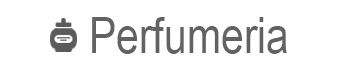
<style>
.page{position:relative;width:353px;height:72px;background:#ffffff}
.page>*{position:absolute;margin:0}
.t1{font:50px "ArialNarrow";color:#626262}
</style>
<div class="page">
<p class="t1" style="left:92px;top:17px;width:195px;height:37px">Perfumeria</p>
</div>
